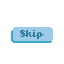
<style>
.page{position:relative;width:64px;height:64px;background:#ffffff}
.page>*{position:absolute;margin:0}
.t1{font:10px "Superscript";color:#3281a2}
</style>
<div class="page">
<p class="t1" style="left:20px;top:30px;width:24px;height:9px">Skip</p>
</div>
